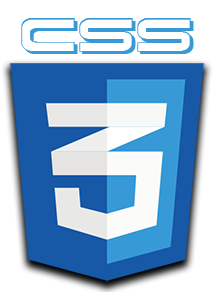
<style>
.page{position:relative;width:215px;height:292px;background:#ffffff}
.page>*{position:absolute;margin:0}
.t1{font:55px "DodgerShadow";color:#379ad6}
</style>
<div class="page">
<p class="t1" style="left:21px;top:18px;width:173px;height:36px">CSS</p>
</div>
